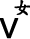
<style>
.page{position:relative;width:30px;height:39px;background:#ffffff}
.page>*{position:absolute;margin:0}
.t1{font:18px "DFKaiShu-SB-Estd-BF";color:#000000;font-weight:bold}
.t2{font:27px "ArialMT";color:#000000;font-weight:bold}
</style>
<div class="page">
<p class="t1" style="left:14px;top:0px;width:17px;height:16px">女</p>
<p class="t2" style="left:0px;top:18px;width:19px;height:21px">V</p>
</div>
